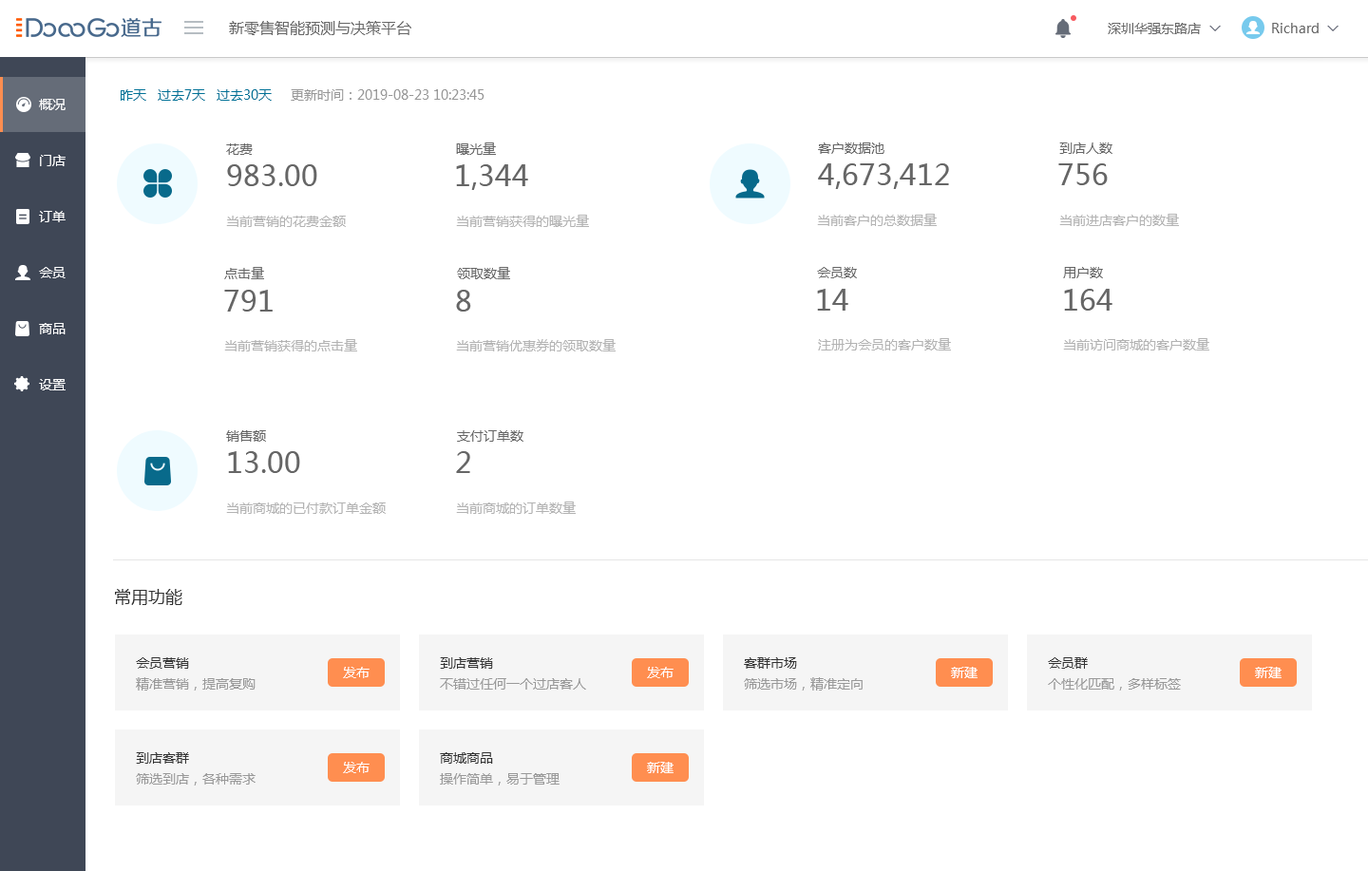
<style>
.page{position:relative;width:1368px;height:871px;background:#ffffff}
.page>*{position:absolute;margin:0}
.t1{font:15.2px "MicrosoftYaHeiUI";color:#666666}
.t2{font:13.3px "MicrosoftYaHeiUI";color:#666666}
.t3{font:13.3px "Marlett";color:#666666}
.t4{font:13.3px "MicrosoftYaHeiUI";color:#007398}
.t5{font:13.3px "MicrosoftYaHeiUI";color:#999999}
.t6{font:13.3px/56.1px "MicrosoftYaHeiUI";color:#ffffff}
.t7{font:28.5px "MicrosoftYaHeiUI";color:#666666}
.t8{font:13.3px "MicrosoftYaHeiUI";color:#b3b3b3}
.t9{font:17.1px "MicrosoftYaHeiUI";color:#333333}
.t10{font:13.3px "MicrosoftYaHeiUI";color:#333333}
.t11{font:13.3px "MicrosoftYaHeiUI";color:#ffffff}
</style>
<div class="page">
<p class="t1" style="left:229px;top:21px;width:182px;height:14px">新零售智能预测与决策平台</p>
<p class="t2" style="left:1108px;top:23px;width:93px;height:11px">深圳华强东路店</p>
<p class="t2" style="left:1272px;top:23px;width:62px;height:10px">Richard <span class="t3">6</span></p>
<p class="t4" style="left:121px;top:89px;width:151px;height:12px">昨天   过去7天   过去30天</p>
<p class="t5" style="left:291px;top:89px;width:194px;height:12px">更新时间：2019-08-23 10:23:45</p>
<p class="t6" style="left:39px;top:99px;width:27px;height:292px">概况<br>门店<br>订单<br>会员<br>商品<br>设置</p>
<p class="t2" style="left:226px;top:143px;width:27px;height:12px">花费</p>
<p class="t2" style="left:456px;top:143px;width:40px;height:12px">曝光量</p>
<p class="t2" style="left:818px;top:143px;width:67px;height:11px">客户数据池</p>
<p class="t2" style="left:1060px;top:143px;width:53px;height:11px">到店人数</p>
<p class="t7" style="left:227px;top:164px;width:90px;height:22px">983.00</p>
<p class="t7" style="left:456px;top:164px;width:72px;height:26px">1,344</p>
<p class="t7" style="left:818px;top:163px;width:131px;height:26px">4,673,412</p>
<p class="t7" style="left:1059px;top:163px;width:49px;height:22px">756</p>
<p class="t8" style="left:226px;top:216px;width:120px;height:11px">当前营销的花费金额</p>
<p class="t8" style="left:456px;top:215px;width:133px;height:12px">当前营销获得的曝光量</p>
<p class="t8" style="left:817px;top:214px;width:120px;height:12px">当前客户的总数据量</p>
<p class="t8" style="left:1060px;top:214px;width:119px;height:12px">当前进店客户的数量</p>
<p class="t2" style="left:224px;top:267px;width:40px;height:12px">点击量</p>
<p class="t2" style="left:457px;top:267px;width:53px;height:12px">领取数量</p>
<p class="t2" style="left:817px;top:267px;width:40px;height:11px">会员数</p>
<p class="t2" style="left:1063px;top:267px;width:40px;height:11px">用户数</p>
<p class="t7" style="left:224px;top:290px;width:49px;height:22px">791</p>
<p class="t7" style="left:456px;top:290px;width:15px;height:22px">8</p>
<p class="t7" style="left:817px;top:289px;width:32px;height:22px">14</p>
<p class="t7" style="left:1064px;top:289px;width:49px;height:22px">164</p>
<p class="t8" style="left:224px;top:339px;width:133px;height:13px">当前营销获得的点击量</p>
<p class="t8" style="left:456px;top:339px;width:160px;height:13px">当前营销优惠券的领取数量</p>
<p class="t8" style="left:818px;top:338px;width:133px;height:13px">注册为会员的客户数量</p>
<p class="t8" style="left:1063px;top:338px;width:147px;height:13px">当前访问商城的客户数量</p>
<p class="t2" style="left:226px;top:430px;width:40px;height:12px">销售额</p>
<p class="t2" style="left:457px;top:430px;width:67px;height:12px">支付订单数</p>
<p class="t7" style="left:228px;top:451px;width:72px;height:22px">13.00</p>
<p class="t7" style="left:456px;top:451px;width:14px;height:22px">2</p>
<p class="t8" style="left:226px;top:503px;width:160px;height:11px">当前商城的已付款订单金额</p>
<p class="t8" style="left:456px;top:502px;width:120px;height:12px">当前商城的订单数量</p>
<p class="t9" style="left:115px;top:589px;width:67px;height:16px">常用功能</p>
<p class="t10" style="left:136px;top:658px;width:53px;height:11px">会员营销</p>
<p class="t10" style="left:440px;top:658px;width:53px;height:11px">到店营销</p>
<p class="t10" style="left:744px;top:658px;width:53px;height:11px">客群市场</p>
<p class="t10" style="left:1048px;top:658px;width:40px;height:11px">会员群</p>
<p class="t5" style="left:136px;top:678px;width:120px;height:13px">精准营销，提高复购</p>
<p class="t11" style="left:343px;top:667px;width:27px;height:11px">发布</p>
<p class="t11" style="left:647px;top:667px;width:27px;height:11px">发布</p>
<p class="t5" style="left:744px;top:678px;width:119px;height:13px">筛选市场，精准定向</p>
<p class="t11" style="left:951px;top:667px;width:27px;height:11px">新建</p>
<p class="t11" style="left:1255px;top:667px;width:27px;height:11px">新建</p>
<p class="t5" style="left:440px;top:678px;width:146px;height:12px">不错过任何一个过店客人</p>
<p class="t5" style="left:1048px;top:678px;width:133px;height:13px">个性化匹配，多样标签</p>
<p class="t10" style="left:136px;top:753px;width:53px;height:11px">到店客群</p>
<p class="t10" style="left:440px;top:753px;width:53px;height:11px">商城商品</p>
<p class="t5" style="left:136px;top:774px;width:120px;height:12px">筛选到店，各种需求</p>
<p class="t11" style="left:343px;top:762px;width:27px;height:12px">发布</p>
<p class="t5" style="left:440px;top:774px;width:120px;height:12px">操作简单，易于管理</p>
<p class="t11" style="left:647px;top:762px;width:27px;height:12px">新建</p>
</div>
